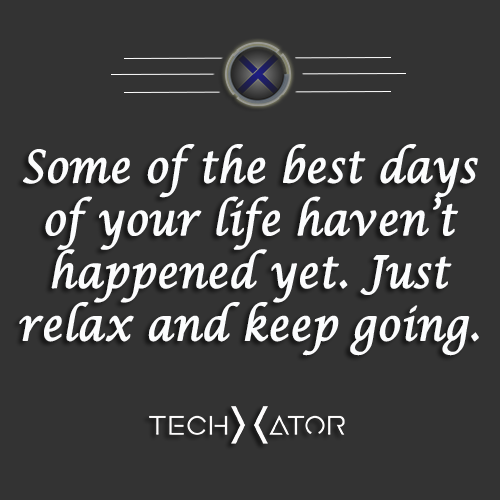
<style>
.page{position:relative;width:500px;height:500px;background:#333333}
.page>*{position:absolute;margin:0}
.t1{font:43.9px "LucidaCalligraphy-Italic";color:#fbfcfd;font-weight:bold;scale:0.88 1}
</style>
<div class="page">
<p class="t1" style="left:19px;top:144px;width:460px;height:212px;text-align:center">Some of the best days<br>of your life haven’t<br>happened yet. Just<br>relax and keep going.</p>
</div>
